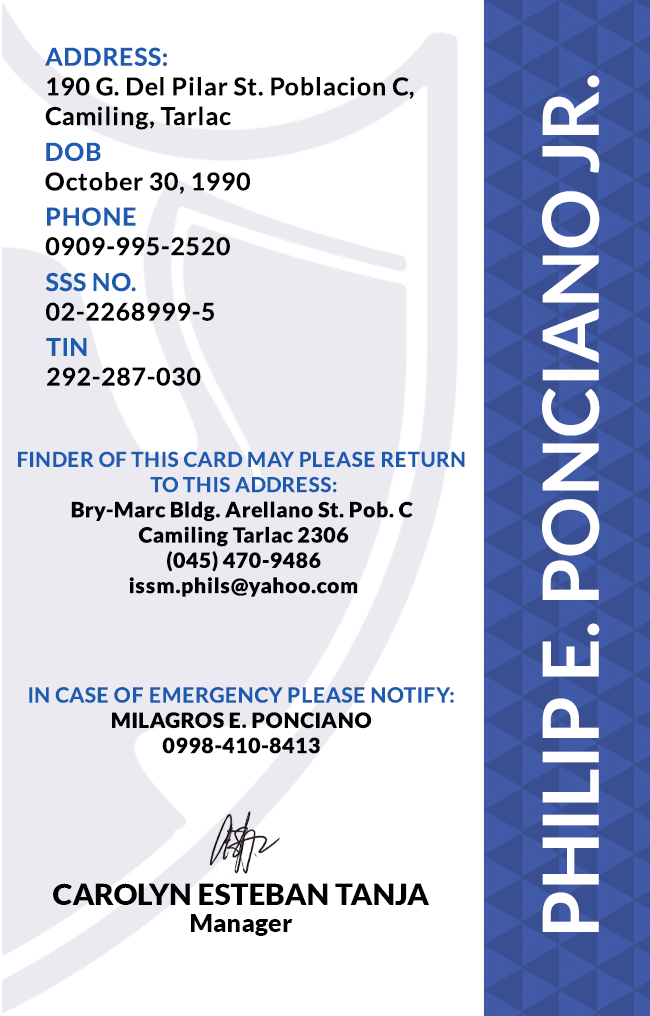
<style>
.page{position:relative;width:650px;height:1016px;background:#ffffff}
.page>*{position:absolute;margin:0}
.t1{font:24.7px/29.6px "Lato-Bold";letter-spacing:0.025em;color:#000000}
.t2{font:77.6px "Lato-Bold";color:#ffffff}
.t3{font:24.7px/29.6px "Lato-Bold";letter-spacing:0.025em}
.t4{font:21.1px "Lato-Black";letter-spacing:0.025em}
.t5{font:20.5px/25.3px "Lato-Bold";letter-spacing:0.025em;text-transform:uppercase}
.t6{font:21.1px/25.3px "Lato-Bold";letter-spacing:0.025em}
.t7{font:29.5px "Lato-Black";color:#000000}
.t8{font:25px "Lato-Black";color:#000000}
</style>
<div class="page">
<p class="t1" style="left:45px;top:47px;width:369px;height:83px">ADDRESS:<br>190 G. Del Pilar St. Poblacion C,<br>Camiling, Tarlac</p>
<p class="t2" style="left:542px;top:75px;width:58px;height:857px;rotate:-90deg">PHILIP E. PONCIANO JR.</p>
<p class="t1" style="left:45px;top:142px;width:205px;height:52px">DOB<br>October 30, 1990</p>
<p class="t3" style="left:45px;top:207px;width:185px;height:49px">PHONE <br>0909-995-2520</p>
<p class="t3" style="left:45px;top:272px;width:169px;height:49px">SSS NO.<br>02-2268999-5</p>
<p class="t1" style="left:46px;top:338px;width:155px;height:48px">TIN<br>292-287-030</p>
<p class="t4" style="left:18px;top:451px;width:447px;height:146px;text-align:center"><span class="t5">Finder of this card may please return <br>to this address:<br></span>Bry-Marc Bldg. Arellano St. Pob. C <br>Camiling Tarlac 2306<br>(045) 470-9486<br>issm.phils@yahoo.com</p>
<p class="t6" style="left:29px;top:687px;width:425px;height:67px;text-align:center">IN CASE OF EMERGENCY PLEASE NOTIFY:<br><span class="t4">MILAGROS E. PONCIANO<br>0998-410-8413</span></p>
<p class="t7" style="left:53px;top:883px;width:376px;height:22px">CAROLYN ESTEBAN TANJA</p>
<p class="t8" style="left:191px;top:914px;width:102px;height:22px">Manager</p>
</div>
